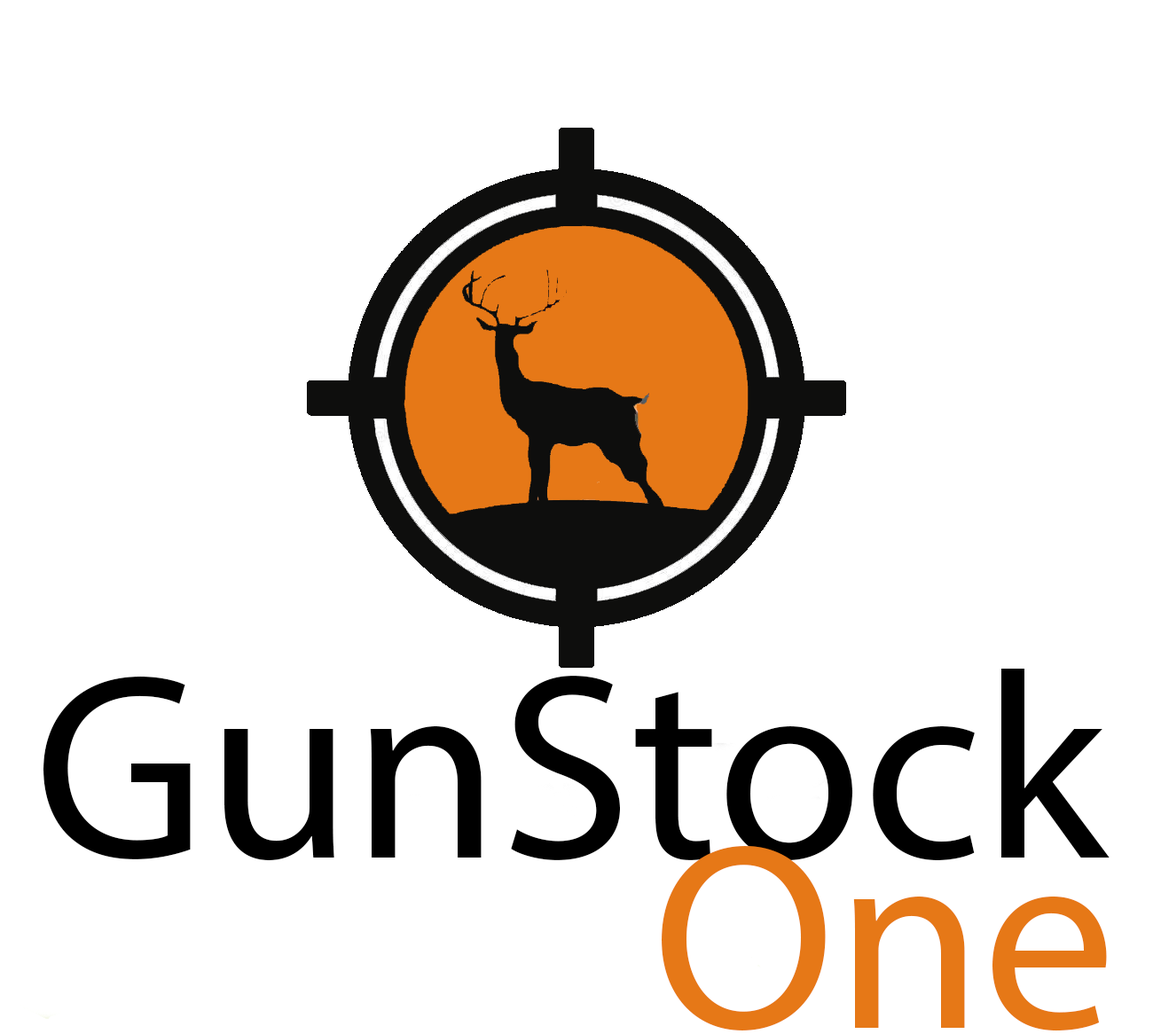
<style>
.page{position:relative;width:1153px;height:1034px;background:#ffffff}
.page>*{position:absolute;margin:0}
.t1{font:266.1px "MyriadPro-Regular";color:#000000}
.t2{font:266.1px "MyriadPro-Regular";color:#e67817}
</style>
<div class="page">
<p class="t1" style="left:43px;top:669px;width:1067px;height:192px">GunStock</p>
<p class="t2" style="left:662px;top:846px;width:445px;height:186px">One</p>
</div>
